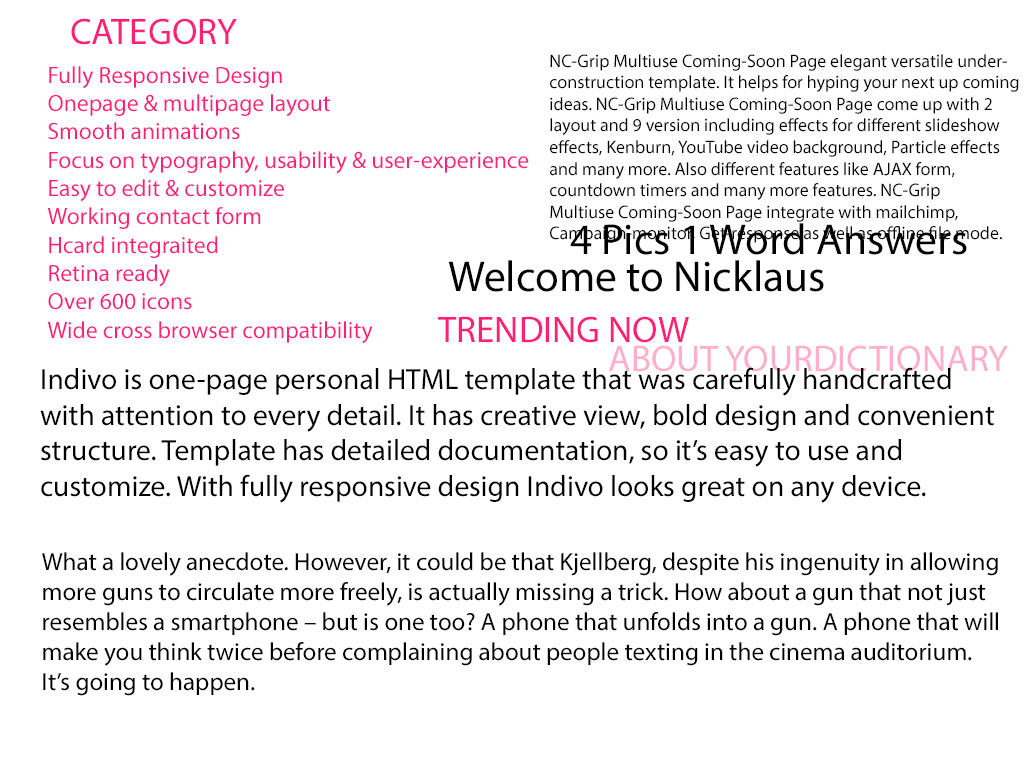
<style>
.page{position:relative;width:1024px;height:768px;background:#ffffff}
.page>*{position:absolute;margin:0}
.t1{font:37px "MyriadPro-Regular";color:#ff2078}
.t2{font:18px "MyriadPro-Regular";color:#000000}
.t3{font:23.6px "MyriadPro-Regular";color:#ff2078}
.t4{font:43.4px "MyriadPro-Regular";color:#000000}
.t5{font:37px "MyriadPro-Regular";color:#ffafc7}
.t6{font:29.5px "MyriadPro-Regular";color:#000000}
.t7{font:25px "MyriadPro-Regular";color:#000000}
</style>
<div class="page">
<p class="t1" style="left:71px;top:18px;width:166px;height:27px">CATEGORY</p>
<p class="t2" style="left:550px;top:54px;width:469px;height:189px">NC-Grip Multiuse Coming-Soon Page elegant versatile under-<br>construction template. It helps for hyping your next up coming <br>ideas. NC-Grip Multiuse Coming-Soon Page come up with 2 <br>layout and 9 version including effects for different slideshow <br>effects, Kenburn, YouTube video background, Particle effects <br>and many more. Also different features like AJAX form, <br>countdown timers and many more features. NC-Grip <br>Multiuse Coming-Soon Page integrate with mailchimp, <br>Campaign-monitor, Get-response as well as offline file mode.</p>
<p class="t3" style="left:47px;top:66px;width:482px;height:278px">Fully Responsive Design<br>Onepage &amp; multipage layout<br>Smooth animations<br>Focus on typography, usability &amp; user-experience<br>Easy to edit &amp; customize<br>Working contact form<br>Hcard integraited<br>Retina ready<br>Over 600 icons<br>Wide cross browser compatibility</p>
<p class="t4" style="left:570px;top:223px;width:397px;height:32px">4 Pics 1 Word Answers</p>
<p class="t4" style="left:448px;top:260px;width:376px;height:32px">Welcome to Nicklaus</p>
<p class="t1" style="left:438px;top:316px;width:251px;height:27px">TRENDING NOW</p>
<p class="t5" style="left:609px;top:345px;width:399px;height:27px">ABOUT YOURDICTIONARY</p>
<p class="t6" style="left:40px;top:367px;width:954px;height:136px">Indivo is one-page personal HTML template that was carefully handcrafted <br>with attention to every detail. It has creative view, bold design and convenient <br>structure. Template has detailed documentation, so it’s easy to use and <br>customize. With fully responsive design Indivo looks great on any device.</p>
<p class="t7" style="left:42px;top:552px;width:956px;height:144px">What a lovely anecdote. However, it could be that Kjellberg, despite his ingenuity in allowing<br>more guns to circulate more freely, is actually missing a trick. How about a gun that not just <br>resembles a smartphone – but is one too? A phone that unfolds into a gun. A phone that will <br>make you think twice before complaining about people texting in the cinema auditorium. <br>It’s going to happen.</p>
</div>
